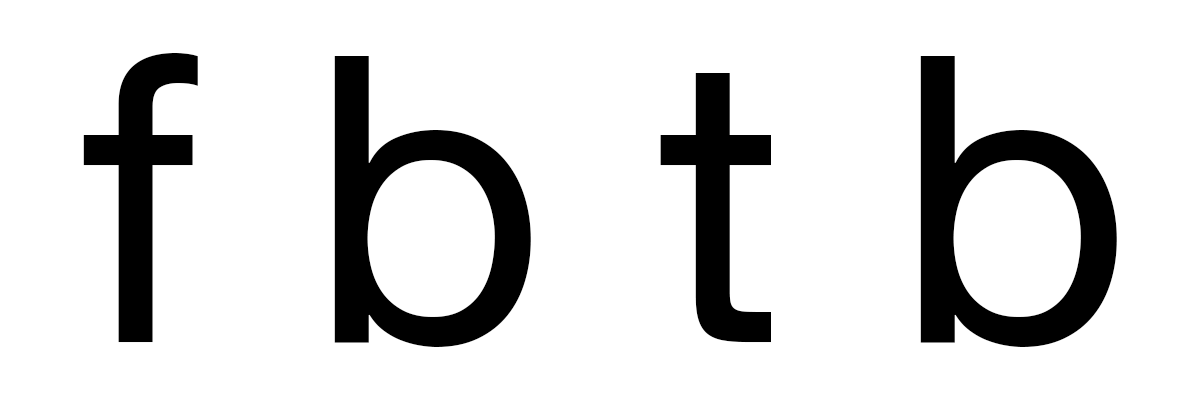
<style>
.page{position:relative;width:1200px;height:400px;background:#ffffff}
.page>*{position:absolute;margin:0}
.t1{font:400px "HelveticaNeue";color:#000000}
</style>
<div class="page">
<p class="t1" style="left:83px;top:53px;width:1034px;height:294px">f b t b</p>
</div>
